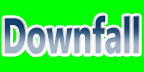
<style>
.page{position:relative;width:144px;height:72px;background:#00ff00}
.page>*{position:absolute;margin:0}
.t1{font:49.7px "Ebrima-Bold";scale:0.66 1}
</style>
<div class="page">
<p class="t1" style="left:4px;top:15px;width:135px;height:39px">Downfall</p>
</div>
